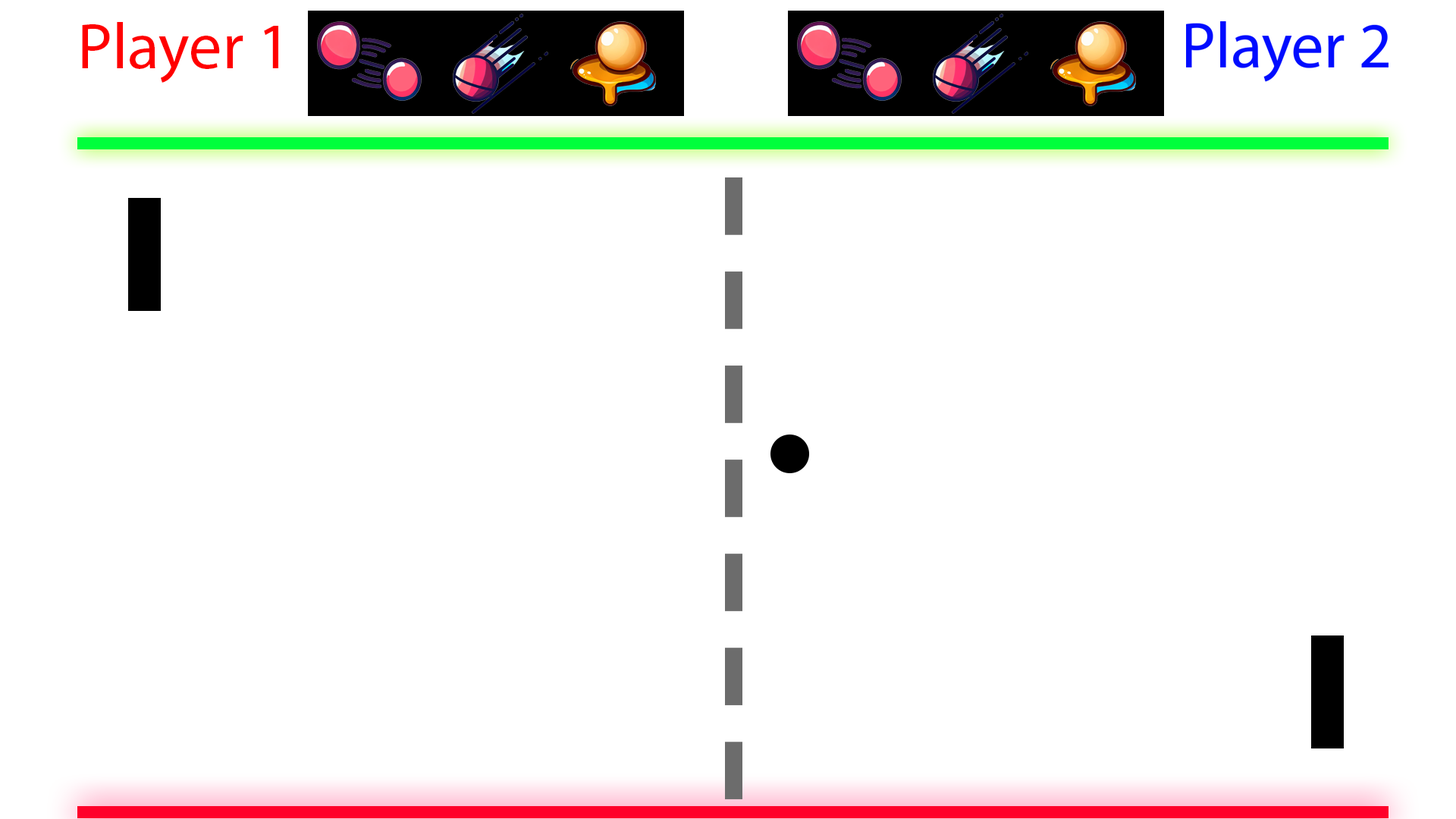
<style>
.page{position:relative;width:1456px;height:819px;background:#ffffff}
.page>*{position:absolute;margin:0}
.t1{font:65.5px "MyriadPro-Regular";color:#ff0000}
</style>
<div class="page">
<p class="t1" style="left:82px;top:22px;width:196px;height:61px">Player 1</p>
</div>
